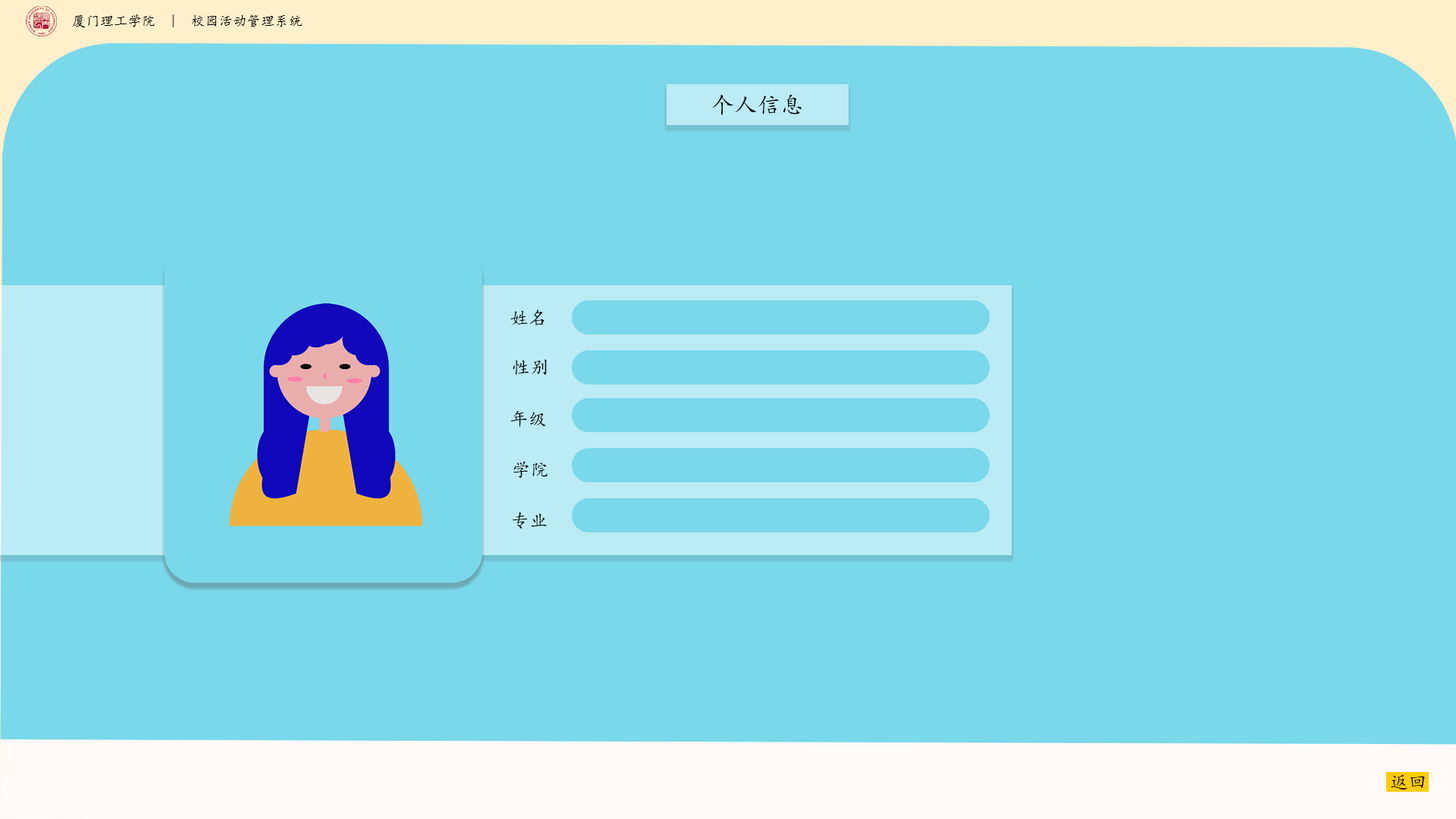
<style>
.page{position:relative;width:1456px;height:819px;background:#79d8ea}
.page>*{position:absolute;margin:0}
.t1{font:13.6px "KaiTi";letter-spacing:0.02em;color:#020202}
.t2{font:13.6px "KaiTi";letter-spacing:0.02em;color:#000000}
.t3{font:13.6px "KaiTi";letter-spacing:0.02em;color:#626266}
.t4{font:22.7px "KaiTi";letter-spacing:0.02em;color:#000000}
.t5{font:18.2px "KaiTi";letter-spacing:0.02em;color:#000000}
</style>
<div class="page">
<p class="t1" style="left:72px;top:14px;width:230px;height:13px"><span class="t2">厦门理工学院</span><span class="t3">  |</span>  校园活动管理系统</p>
<p class="t4" style="left:712px;top:95px;width:90px;height:20px">个人信息</p>
<p class="t5" style="left:510px;top:309px;width:34px;height:17px">姓名</p>
<p class="t5" style="left:513px;top:359px;width:34px;height:16px">性别</p>
<p class="t5" style="left:510px;top:410px;width:36px;height:18px">年级</p>
<p class="t5" style="left:513px;top:461px;width:35px;height:18px">学院</p>
<p class="t5" style="left:512px;top:512px;width:35px;height:17px">专业</p>
<p class="t5" style="left:1391px;top:774px;width:34px;height:16px">返回</p>
</div>
